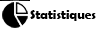
<style>
.page{position:relative;width:100px;height:30px;background:#ffffff}
.page>*{position:absolute;margin:0}
.t1{font:13px "BerlinSansFBDemi-Bold";color:#000000}
</style>
<div class="page">
<p class="t1" style="left:30px;top:10px;width:66px;height:11px">Statistiques</p>
</div>
